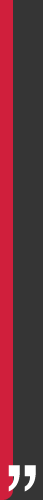
<style>
.page{position:relative;width:43px;height:500px;background:#353535}
.page>*{position:absolute;margin:0}
.t1{font:84.4px "GenevaCY";color:#ffffff}
</style>
<div class="page">
<p class="t1" style="left:8px;top:465px;width:28px;height:27px;rotate:180deg">“</p>
</div>
